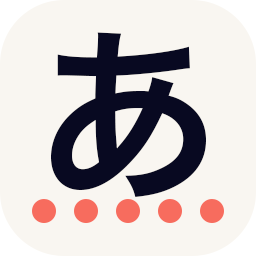
<style>
.page{position:relative;width:256px;height:256px;background:#f9f6f1}
.page>*{position:absolute;margin:0}
.t1{font:186.7px "HiraKakuProN-W6";color:#080921}
</style>
<div class="page">
<p class="t1" style="left:51px;top:32px;width:156px;height:165px">あ</p>
</div>
